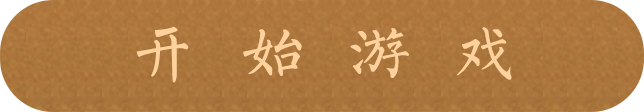
<style>
.page{position:relative;width:644px;height:112px}
.page>*{position:absolute;margin:0}
.t1{font:66.7px "Untitled";letter-spacing:0.05em;color:#ffd29d}
</style>
<div class="page">
<p class="t1" style="left:136px;top:26px;width:376px;height:57px">开 始 游 戏</p>
</div>
